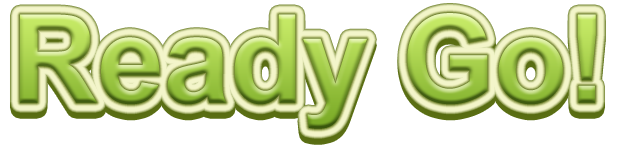
<style>
.page{position:relative;width:620px;height:146px;background:#ffffff}
.page>*{position:absolute;margin:0}
.t1{font:122.8px "Arial-BoldMT";scale:0.97 1}
</style>
<div class="page">
<p class="t1" style="left:20px;top:13px;width:576px;height:116px">Ready Go!</p>
<p class="t1" style="left:20px;top:19px;width:576px;height:116px">Ready Go!</p>
</div>
